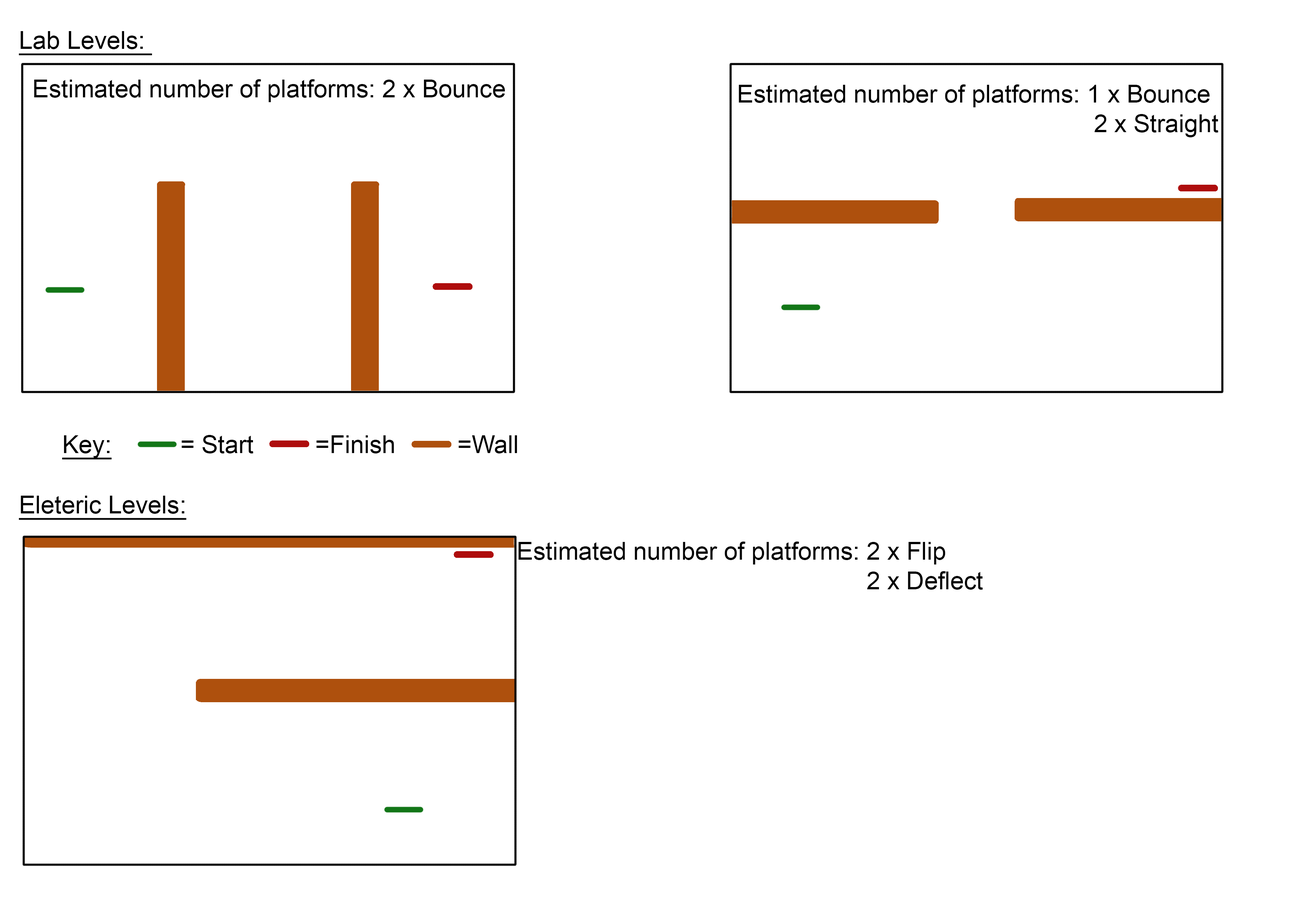
<style>
.page{position:relative;width:1299px;height:918px;background:#ffffff}
.page>*{position:absolute;margin:0}
.t1{font:24.7px "ArialMT";color:#000000;text-decoration:underline}
.t2{font:24.7px "ArialMT";color:#000000}
</style>
<div class="page">
<p class="t1" style="left:19px;top:31px;width:133px;height:25px">Lab Levels:</p>
<p class="t2" style="left:34px;top:79px;width:471px;height:23px">Estimated number of platforms: 2 x Bounce</p>
<p class="t2" style="left:739px;top:84px;width:479px;height:53px">Estimated number of platforms: 1 x Bounce<br>                                                    2 x Straight</p>
<p class="t2" style="left:62px;top:435px;width:455px;height:25px"><span class="t1">Key:</span>          = Start         =Finish         =Wall</p>
<p class="t1" style="left:19px;top:496px;width:168px;height:24px">Eleteric Levels:</p>
<p class="t2" style="left:518px;top:542px;width:465px;height:48px">Estimated number of platforms: 2 x Flip <br>                                                   2 x Deflect</p>
</div>
